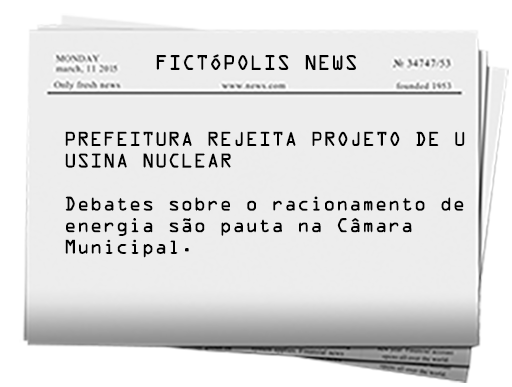
<style>
.page{position:relative;width:512px;height:387px;background:#ededed}
.page>*{position:absolute;margin:0}
.t1{font:18.8px "OCRAStd";color:#000000}
.t2{font:18px "OCRAStd";color:#000000}
</style>
<div class="page">
<p class="t1" style="left:156px;top:54px;width:200px;height:16px">FICTÓPOLIS NEWS</p>
<p class="t2" style="left:65px;top:131px;width:400px;height:127px">PREFEITURA REJEITA PROJETO DE U<br>USINA NUCLEAR<br><br>Debates sobre o racionamento de<br>energia são pauta na Câmara <br>Municipal.</p>
</div>
